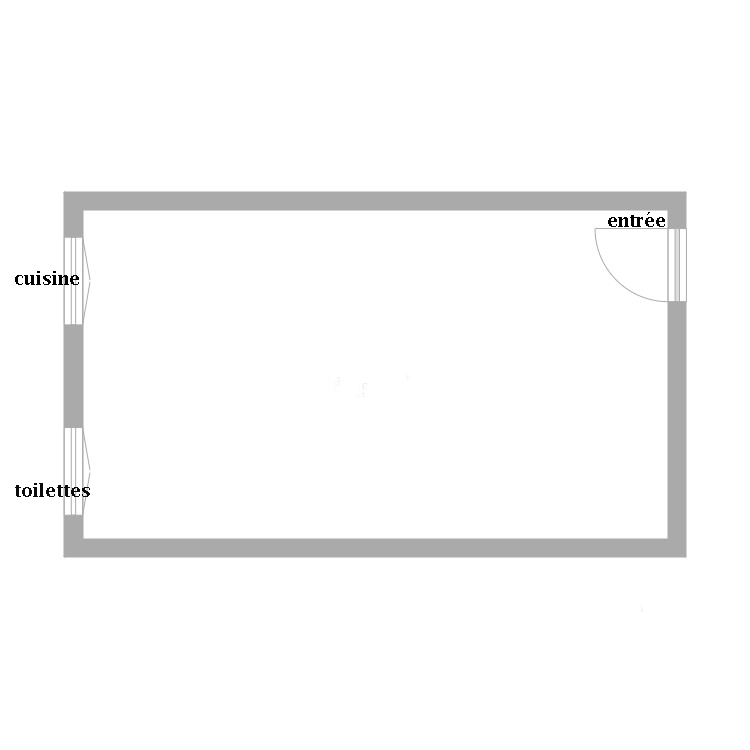
<style>
.page{position:relative;width:750px;height:750px;background:#ffffff}
.page>*{position:absolute;margin:0}
.t1{font:18px "LucidaBright-Demi";color:#000000}
.t2{font:18px "LucidaBright-Demi";color:#0b0b0b}
</style>
<div class="page">
<p class="t1" style="left:608px;top:212px;width:57px;height:15px">entrée</p>
<p class="t1" style="left:15px;top:271px;width:64px;height:14px">cuisine</p>
<p class="t2" style="left:15px;top:483px;width:75px;height:14px">toilettes</p>
</div>
